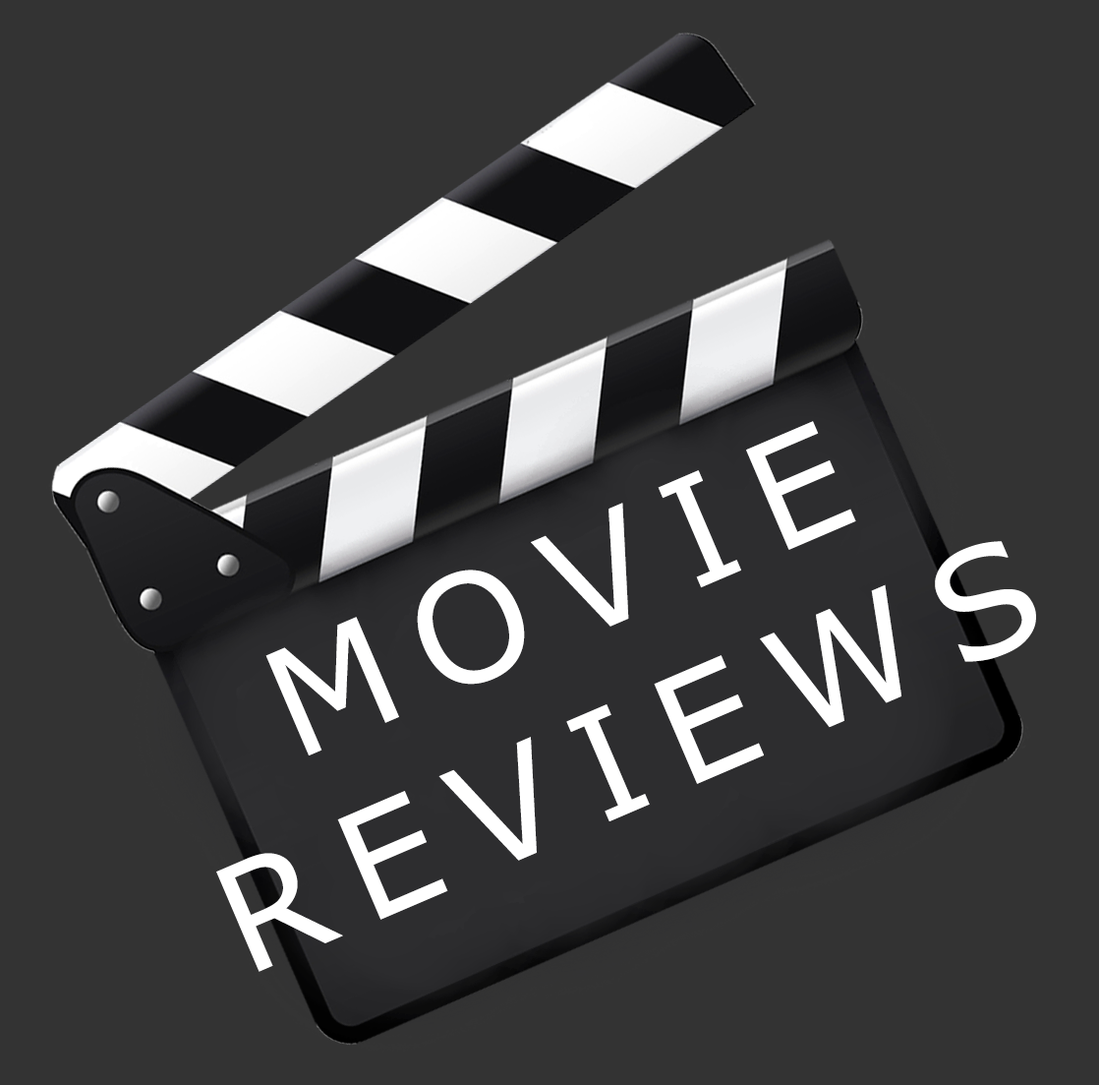
<style>
.page{position:relative;width:1099px;height:1085px;background:#333333}
.page>*{position:absolute;margin:0}
.t1{font:149.1px "MSReferenceSansSerif";letter-spacing:0.18em;color:#ffffff;text-transform:uppercase}
</style>
<div class="page">
<p class="t1" style="left:216px;top:421px;width:820px;height:551px;text-align:center;rotate:-23deg">MOVIE<br>REVIEWS</p>
</div>
